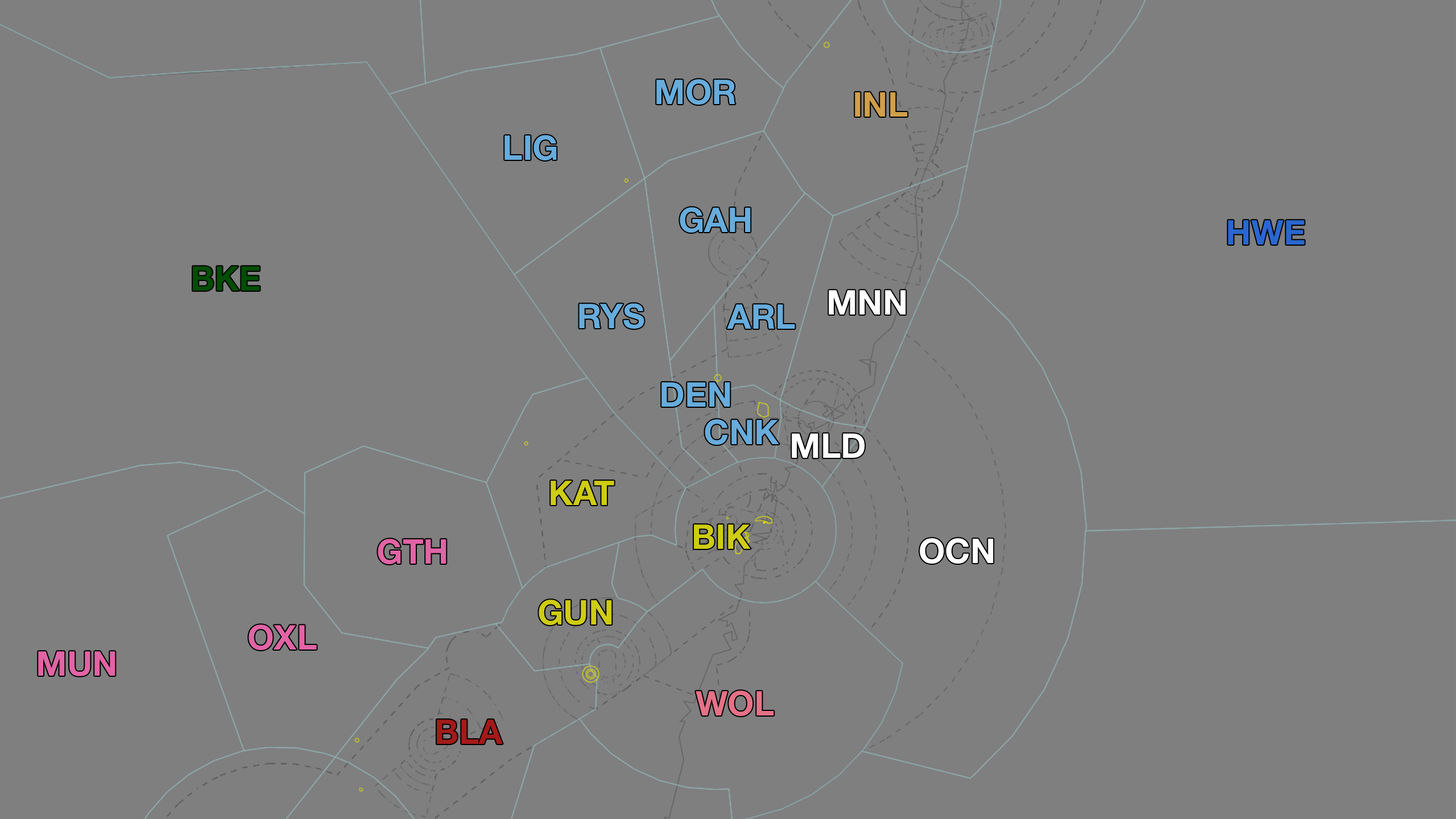
<style>
.page{position:relative;width:1456px;height:819px;background:#7f7f7f}
.page>*{position:absolute;margin:0}
.t1{font:34.1px "HelveticaNeue-Bold";color:#67acdc}
.t2{font:34.1px "HelveticaNeue-Bold";color:#d09f4a}
.t3{font:34.1px "HelveticaNeue-Bold";color:#2967cf}
.t4{font:34.1px "HelveticaNeue-Bold";color:#004d04}
.t5{font:34.1px "HelveticaNeue-Bold";color:#ffffff}
.t6{font:34.1px "HelveticaNeue-Bold";color:#cecc13}
.t7{font:34.1px "HelveticaNeue-Bold";color:#e164a5}
.t8{font:34.1px "HelveticaNeue-Bold";color:#e57187}
.t9{font:34.1px "HelveticaNeue-Bold";color:#a31a1a}
</style>
<div class="page">
<p class="t1" style="left:656px;top:79px;width:79px;height:26px">MOR</p>
<p class="t2" style="left:855px;top:92px;width:53px;height:25px">INL</p>
<p class="t1" style="left:504px;top:135px;width:53px;height:25px">LIG</p>
<p class="t1" style="left:680px;top:207px;width:71px;height:26px">GAH</p>
<p class="t3" style="left:1228px;top:220px;width:77px;height:25px">HWE</p>
<p class="t4" style="left:193px;top:266px;width:67px;height:25px">BKE</p>
<p class="t5" style="left:829px;top:290px;width:77px;height:25px">MNN</p>
<p class="t1" style="left:579px;top:303px;width:65px;height:26px">RYS</p>
<p class="t1" style="left:727px;top:304px;width:68px;height:25px">ARL</p>
<p class="t1" style="left:661px;top:382px;width:69px;height:25px">DEN</p>
<p class="t1" style="left:705px;top:419px;width:74px;height:26px">CNK</p>
<p class="t5" style="left:792px;top:433px;width:73px;height:25px">MLD</p>
<p class="t6" style="left:551px;top:481px;width:63px;height:24px">KAT</p>
<p class="t6" style="left:694px;top:524px;width:57px;height:25px">BIK</p>
<p class="t7" style="left:378px;top:539px;width:68px;height:25px">GTH</p>
<p class="t5" style="left:920px;top:538px;width:74px;height:26px">OCN</p>
<p class="t6" style="left:539px;top:599px;width:73px;height:26px">GUN</p>
<p class="t7" style="left:249px;top:624px;width:68px;height:26px">OXL</p>
<p class="t7" style="left:38px;top:651px;width:77px;height:25px">MUN</p>
<p class="t8" style="left:696px;top:690px;width:78px;height:26px">WOL</p>
<p class="t9" style="left:437px;top:719px;width:66px;height:25px">BLA</p>
</div>
